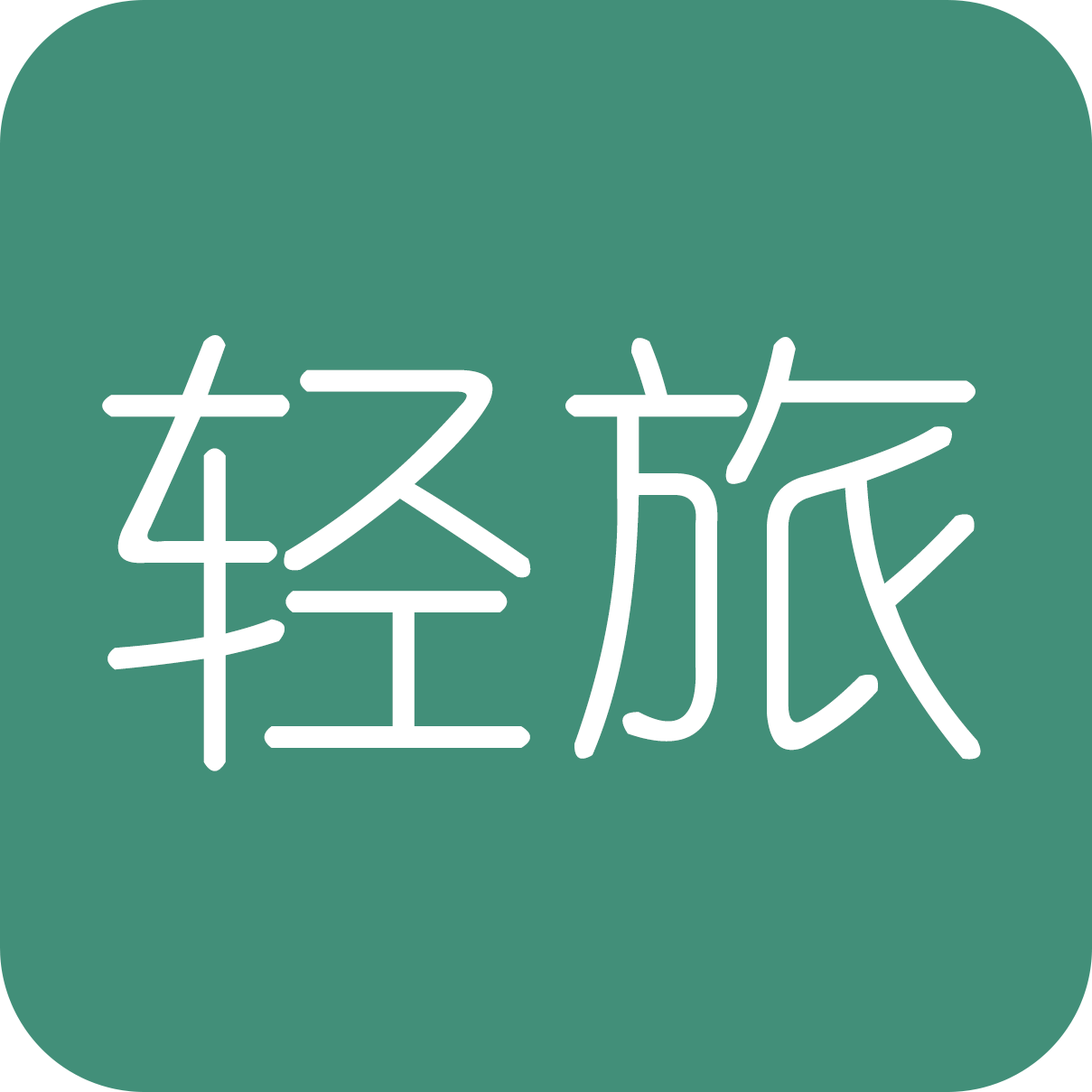
<style>
.page{position:relative;width:1092px;height:1092px;background:#428f79}
.page>*{position:absolute;margin:0}
.t1{font:456px "YouYuan";color:#ffffff}
</style>
<div class="page">
<p class="t1" style="left:102px;top:335px;width:879px;height:436px">轻旅</p>
</div>
